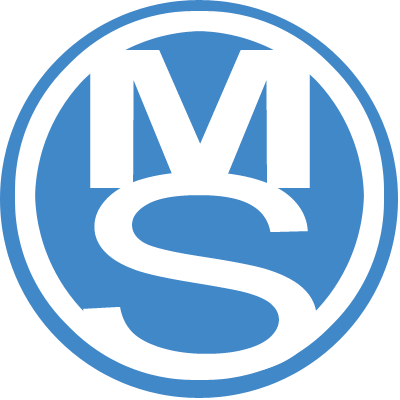
<style>
.page{position:relative;width:400px;height:400px;background:#ffffff}
.page>*{position:absolute;margin:0}
.t1{font:192.5px "Arial-BoldMT";letter-spacing:-0.005em;color:#ffffff;scale:1.65 1}
.t2{font:277.6px "ArialMT";letter-spacing:-0.005em;color:#ffffff;scale:1.47 1}
</style>
<div class="page">
<p class="t1" style="left:90px;top:50px;width:220px;height:138px">M</p>
<p class="t2" style="left:83px;top:172px;width:234px;height:205px">S</p>
</div>
